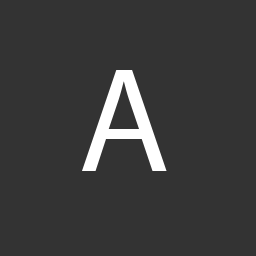
<style>
.page{position:relative;width:256px;height:256px;background:#333333}
.page>*{position:absolute;margin:0}
.t1{font:150px "MyriadPro-Regular";color:#ffffff}
</style>
<div class="page">
<p class="t1" style="left:82px;top:70px;width:85px;height:101px">A</p>
</div>
